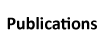
<style>
.page{position:relative;width:105px;height:50px;background:#ffffff}
.page>*{position:absolute;margin:0}
.t1{font:18px "Calibri-Bold";color:#020202}
</style>
<div class="page">
<p class="t1" style="left:7px;top:17px;width:90px;height:13px">Publications</p>
</div>
